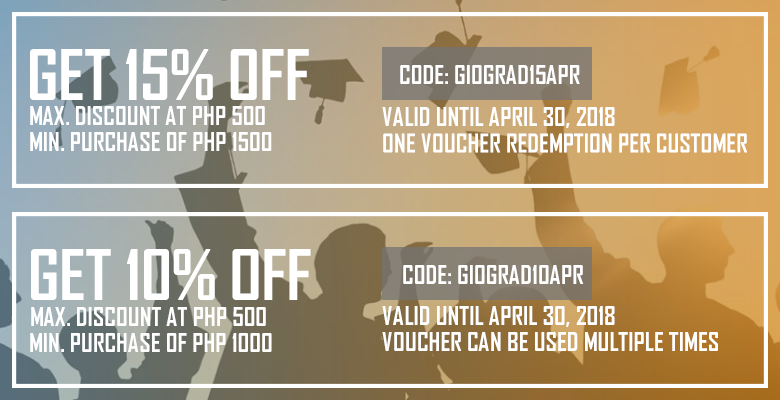
<style>
.page{position:relative;width:780px;height:400px}
.page>*{position:absolute;margin:0}
.t1{font:66.7px "AgencyFB-Bold";color:#ffffff}
.t2{font:25px "AgencyFB-Bold";color:#ffffff}
</style>
<div class="page">
<p class="t1" style="left:30px;top:49px;width:279px;height:51px">GET 15% OFF</p>
<p class="t2" style="left:400px;top:65px;width:180px;height:19px">CODE: GIOGRAD15APR</p>
<p class="t2" style="left:30px;top:106px;width:235px;height:19px">MAX. DISCOUNT AT PHP 500</p>
<p class="t2" style="left:382px;top:107px;width:233px;height:21px">VALID UNTIL APRIL 30, 2018</p>
<p class="t2" style="left:30px;top:132px;width:242px;height:19px">MIN. PURCHASE OF PHP 1500</p>
<p class="t2" style="left:383px;top:133px;width:365px;height:20px">ONE VOUCHER REDEMPTION PER CUSTOMER</p>
<p class="t1" style="left:31px;top:249px;width:280px;height:51px">GET 10% OFF</p>
<p class="t2" style="left:403px;top:265px;width:181px;height:19px">CODE: GIOGRAD10APR</p>
<p class="t2" style="left:31px;top:307px;width:235px;height:19px">MAX. DISCOUNT AT PHP 500</p>
<p class="t2" style="left:382px;top:306px;width:233px;height:21px">VALID UNTIL APRIL 30, 2018</p>
<p class="t2" style="left:30px;top:333px;width:242px;height:19px">MIN. PURCHASE OF PHP 1000</p>
<p class="t2" style="left:382px;top:332px;width:336px;height:19px">VOUCHER CAN BE USED MULTIPLE TIMES</p>
</div>
